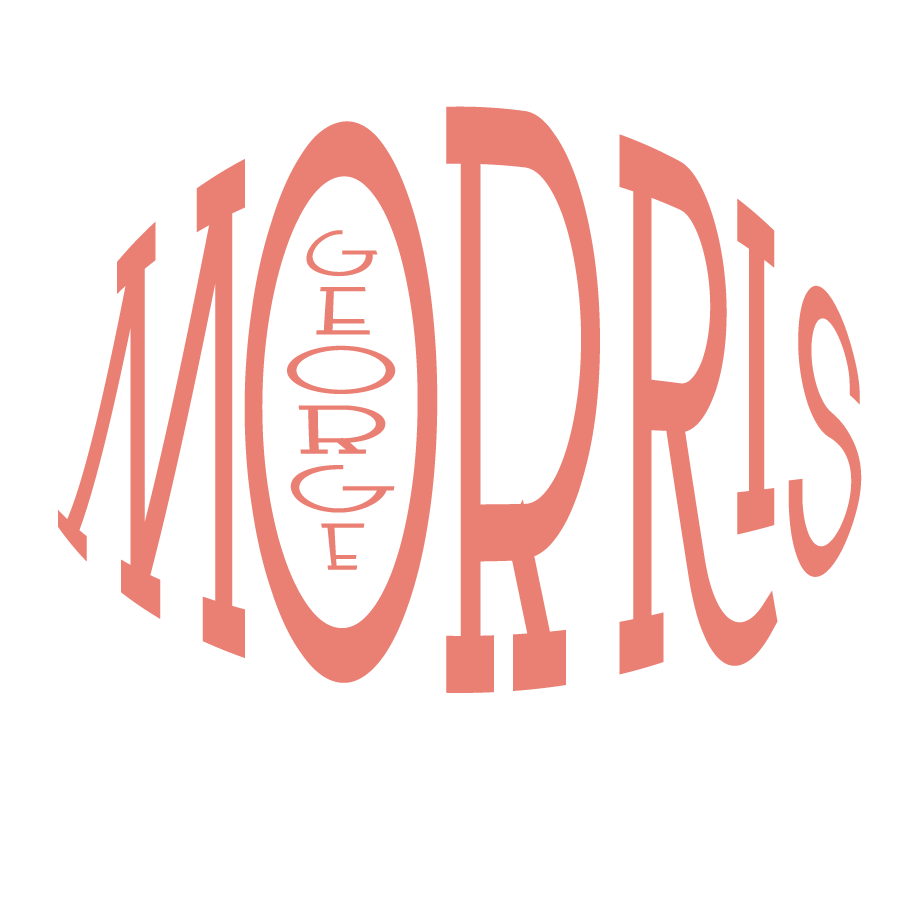
<style>
.page{position:relative;width:899px;height:898px;background:#ffffff}
.page>*{position:absolute;margin:0}
.t1{font:200px "LeSuperSerif-SemiBold";color:#ea7f73}
.t2{font:58.3px "LeSuperSerif-SemiBold";color:#ea7f73}
</style>
<div class="page">
<p class="t1" style="left:58px;top:106px;width:804px;height:587px;text-align:center">morris</p>
<p class="t2" style="left:287px;top:230px;width:109px;height:340px;text-align:center">george</p>
</div>
